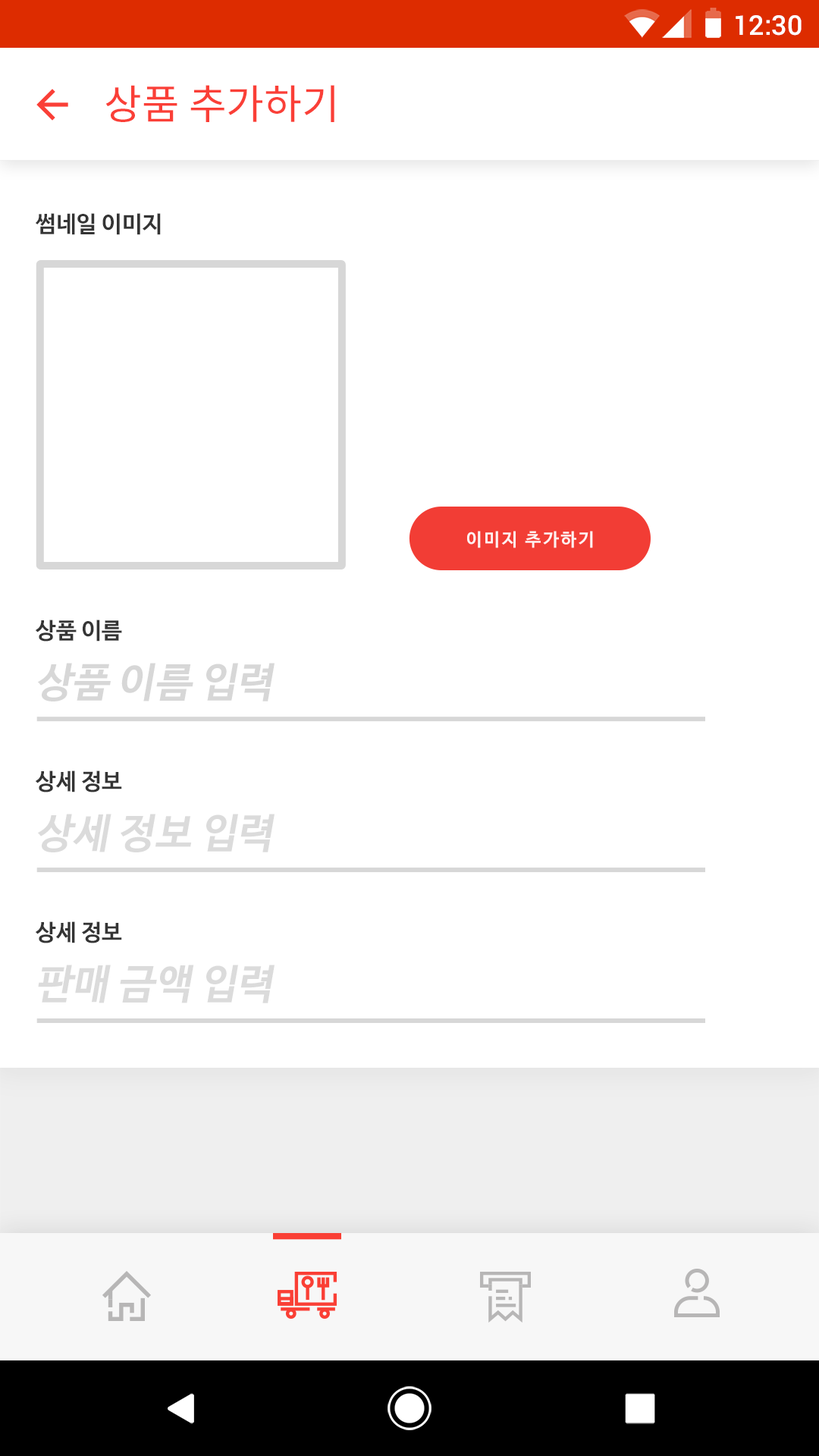
<style>
.page{position:relative;width:819px;height:1456px;background:#ffffff}
.page>*{position:absolute;margin:0}
.t1{font:27.3px "Roboto-Medium";color:#ffffff}
.t2{font:40.9px "NotoSansCJKkr-Regular";color:#fa3f37}
.t3{font:22.7px "NanumBarunGothicBold";color:#343434}
.t4{font:17.8px "NanumBarunGothicBold";letter-spacing:0.1em;color:#ffffff}
.t5{font:40.9px "NanumBarunGothicBold";color:#d7d7d7;font-style:italic}
</style>
<div class="page">
<p class="t1" style="left:736px;top:15px;width:66px;height:21px">12:30</p>
<p class="t2" style="left:105px;top:85px;width:229px;height:37px">상품 추가하기</p>
<p class="t3" style="left:35px;top:213px;width:126px;height:22px">썸네일 이미지</p>
<p class="t4" style="left:467px;top:531px;width:126px;height:17px;opacity:0.9">이미지 추가하기</p>
<p class="t3" style="left:35px;top:620px;width:87px;height:22px">상품 이름</p>
<p class="t5" style="left:38px;top:663px;width:237px;height:38px">상품 이름 입력</p>
<p class="t3" style="left:35px;top:770px;width:87px;height:22px">상세 정보</p>
<p class="t5" style="left:38px;top:814px;width:237px;height:38px;opacity:0.9">상세 정보 입력</p>
<p class="t3" style="left:35px;top:921px;width:87px;height:22px">상세 정보</p>
<p class="t5" style="left:38px;top:965px;width:237px;height:38px;opacity:0.9">판매 금액 입력</p>
</div>
